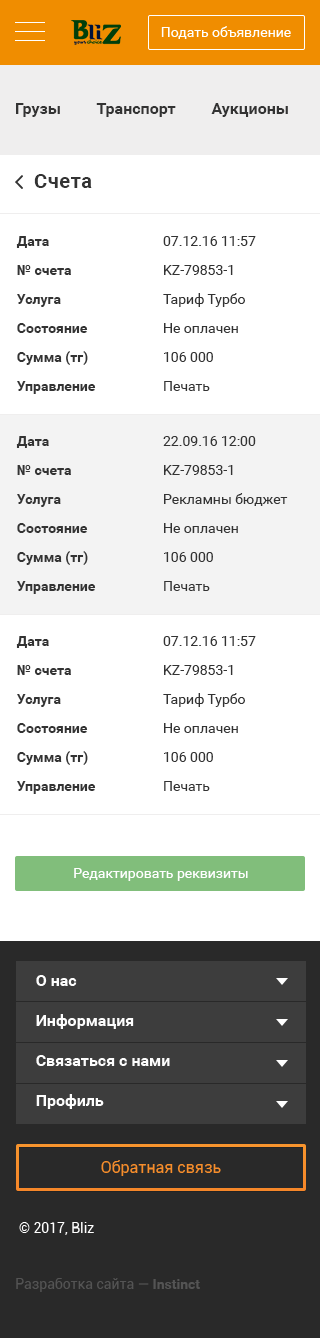
<style>
.page{position:relative;width:320px;height:1338px;background:#ffffff}
.page>*{position:absolute;margin:0}
.t1{font:20px "Roboto-Bold";letter-spacing:0.03em;color:#333333}
.t2{font:14px/24px "Roboto-Bold";color:#333333}
.t3{font:14px/24px "Roboto-Regular";color:#333333}
.t4{font:14px "Roboto-Regular";color:#ffffff}
</style>
<div class="page">
<p class="t1" style="left:34px;top:174px;width:58px;height:14px">Счета</p>
<p class="t2" style="left:16px;top:236px;width:80px;height:158px">Дата <br>№ счета<br>Услуга<br>Состояние<br>Сумма (тг)<br>Управление</p>
<p class="t3" style="left:163px;top:236px;width:93px;height:155px">07.12.16 11:57<br>KZ-79853-1<br>Тариф Турбо<br>Не оплачен<br>106 000<br>Печать</p>
<p class="t2" style="left:16px;top:436px;width:80px;height:158px">Дата <br>№ счета<br>Услуга<br>Состояние<br>Сумма (тг)<br>Управление</p>
<p class="t3" style="left:163px;top:436px;width:125px;height:155px">22.09.16 12:00<br>KZ-79853-1<br>Рекламны бюджет<br>Не оплачен<br>106 000<br>Печать</p>
<p class="t2" style="left:16px;top:636px;width:80px;height:158px">Дата <br>№ счета<br>Услуга<br>Состояние<br>Сумма (тг)<br>Управление</p>
<p class="t3" style="left:163px;top:636px;width:93px;height:155px">07.12.16 11:57<br>KZ-79853-1<br>Тариф Турбо<br>Не оплачен<br>106 000<br>Печать</p>
<p class="t4" style="left:74px;top:868px;width:174px;height:13px">Редактировать реквизиты</p>
</div>
